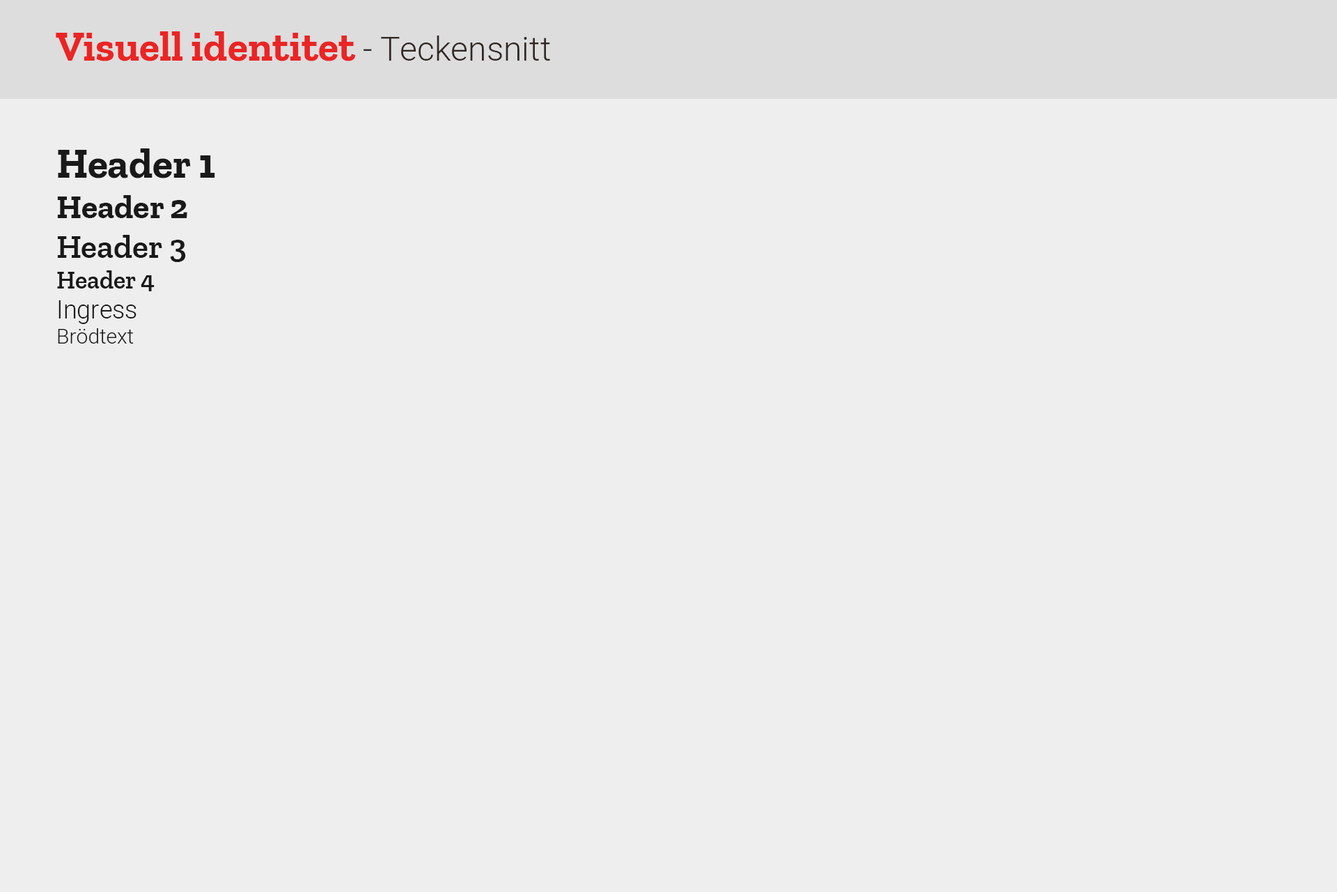
<style>
.page{position:relative;width:1337px;height:892px;background:#eeeeee}
.page>*{position:absolute;margin:0}
.t1{font:41.8px "ZillaSlab-Bold";color:#eb2424}
.t2{font:33.4px "Heebo-Light";color:#302723}
.t3{font:41.8px "ZillaSlab-Bold";color:#191919}
.t4{font:33.4px "ZillaSlab-Bold";color:#191919}
.t5{font:33.4px "ZillaSlab-SemiBold";color:#191919}
.t6{font:25.1px "ZillaSlab-SemiBold";color:#191919}
.t7{font:25.1px "Heebo-Light";color:#191919}
.t8{font:20.9px "Heebo-Light";color:#191919}
</style>
<div class="page">
<p class="t1" style="left:56px;top:31px;width:494px;height:30px">Visuell identitet<span class="t2"> - Teckensnitt</span></p>
<p class="t3" style="left:57px;top:148px;width:158px;height:195px">Header 1 <br><span class="t4">Header 2<br></span><span class="t5">Header 3<br></span><span class="t6">Header 4<br></span><span class="t7">Ingress<br></span><span class="t8">Brödtext</span></p>
</div>
